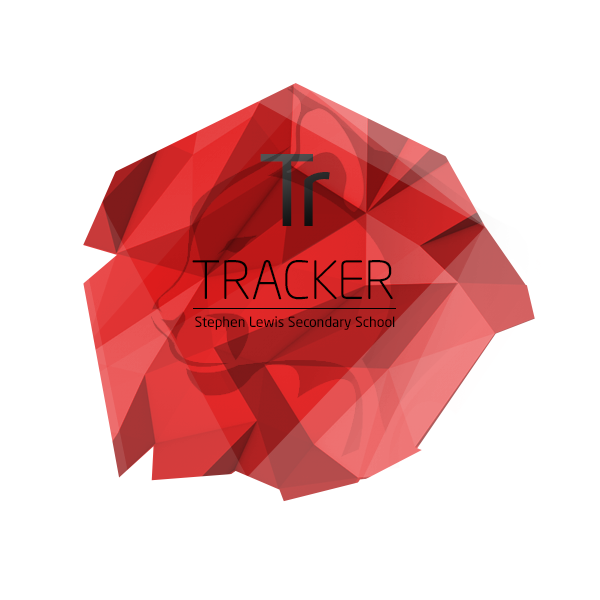
<style>
.page{position:relative;width:600px;height:600px;background:#ffffff}
.page>*{position:absolute;margin:0}
.t1{font:100px "Sommet"}
.t2{font:52px "NeoSansPro-Light";color:#000000}
.t3{font:14px "NeoSansPro-Regular";color:#000000}
</style>
<div class="page">
<p class="t1" style="left:260px;top:154px;width:70px;height:72px">Tr</p>
<p class="t2" style="left:192px;top:260px;width:201px;height:40px">TRACKER</p>
<p class="t3" style="left:195px;top:316px;width:200px;height:14px">Stephen Lewis Secondary School</p>
</div>
